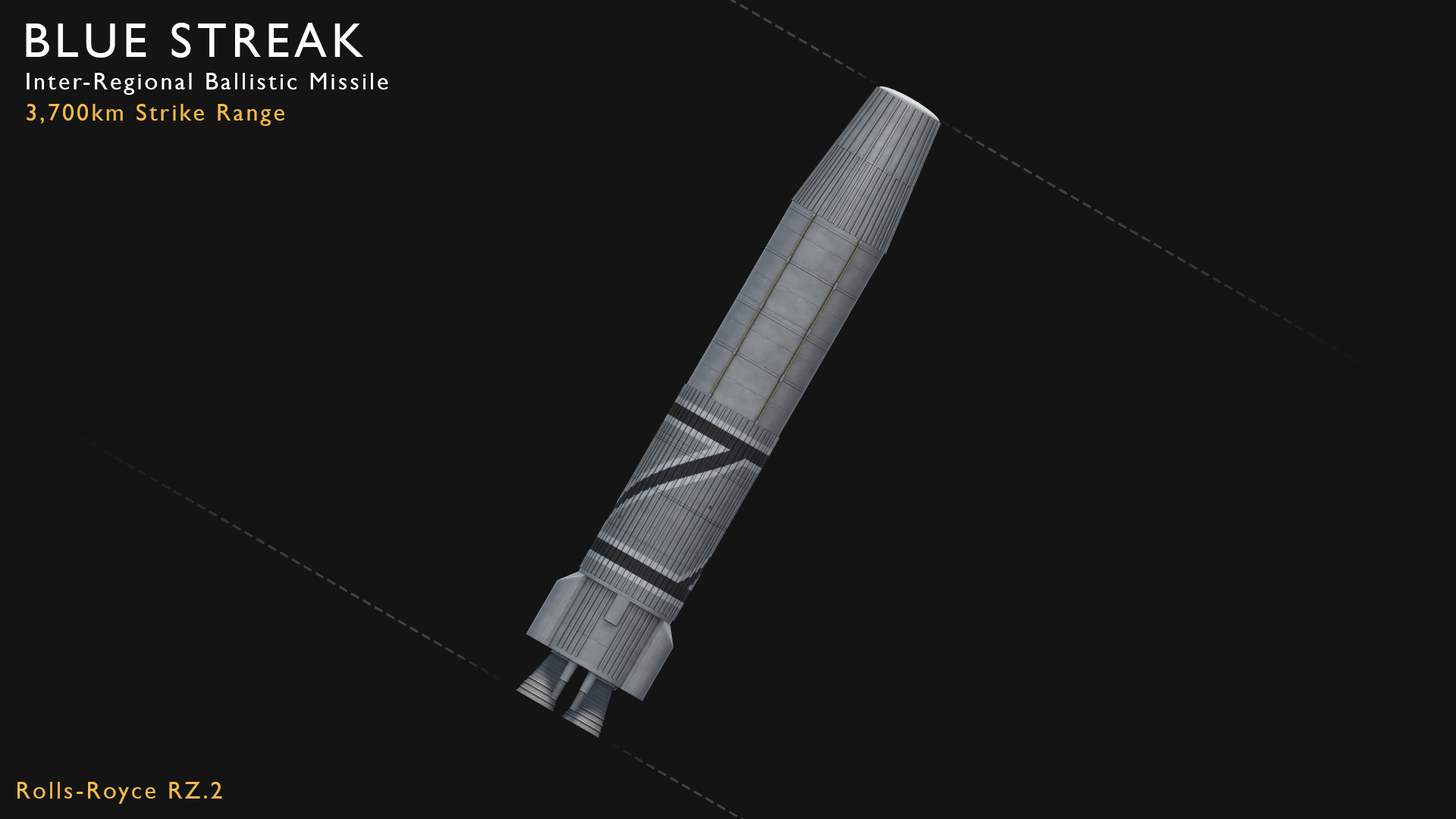
<style>
.page{position:relative;width:1456px;height:819px;background:#141414}
.page>*{position:absolute;margin:0}
.t1{font:48.5px "GillSansMT";letter-spacing:0.1em;color:#ffffff}
.t2{font:24.3px "GillSansMT";letter-spacing:0.1em;color:#ffffff}
.t3{font:24.3px "GillSansMT";letter-spacing:0.1em;color:#f4ba4a}
</style>
<div class="page">
<p class="t1" style="left:26px;top:23px;width:337px;height:35px">BLUE STREAK</p>
<p class="t2" style="left:27px;top:73px;width:361px;height:22px">Inter-Regional Ballistic Missile</p>
<p class="t3" style="left:27px;top:104px;width:257px;height:22px">3,700km Strike Range</p>
<p class="t3" style="left:17px;top:782px;width:205px;height:22px">Rolls-Royce RZ.2</p>
</div>
